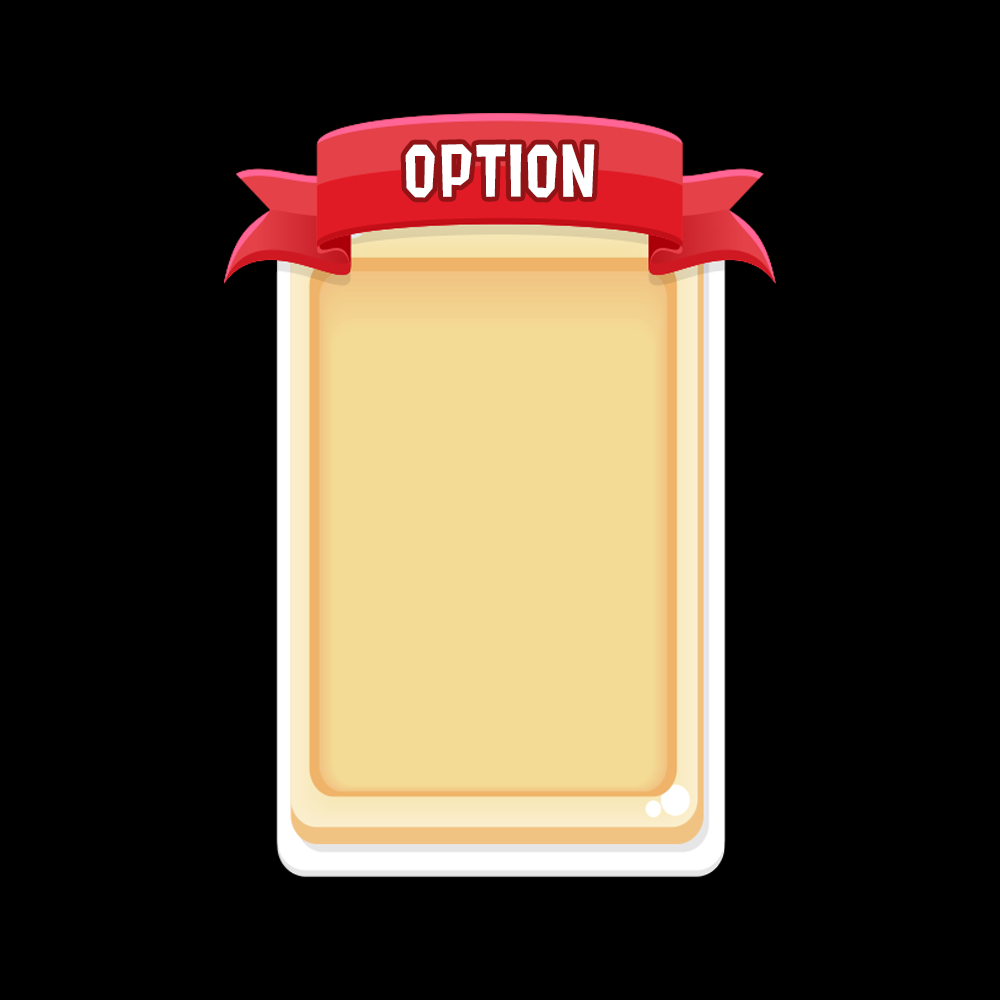
<style>
.page{position:relative;width:1000px;height:1000px;background:#000000}
.page>*{position:absolute;margin:0}
.t1{font:71.6px "Splat2K";letter-spacing:0.01em;color:#ffffff}
</style>
<div class="page">
<p class="t1" style="left:405px;top:144px;width:190px;height:54px">OPTION</p>
</div>
